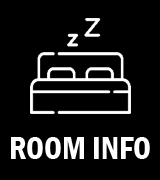
<style>
.page{position:relative;width:160px;height:180px;background:#000000}
.page>*{position:absolute;margin:0}
.t1{font:32px "FranklinGothic-DemiCond";color:#ffffff}
</style>
<div class="page">
<p class="t1" style="left:11px;top:137px;width:139px;height:22px">ROOM INFO</p>
</div>
